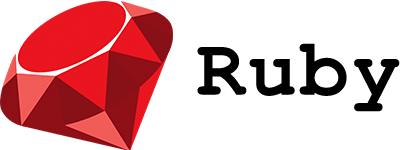
<style>
.page{position:relative;width:400px;height:150px;background:#ffffff}
.page>*{position:absolute;margin:0}
.t1{font:80px "CourierNewPS-BoldMT";letter-spacing:0.05em;color:#000000}
</style>
<div class="page">
<p class="t1" style="left:197px;top:43px;width:203px;height:69px">Ruby</p>
</div>
